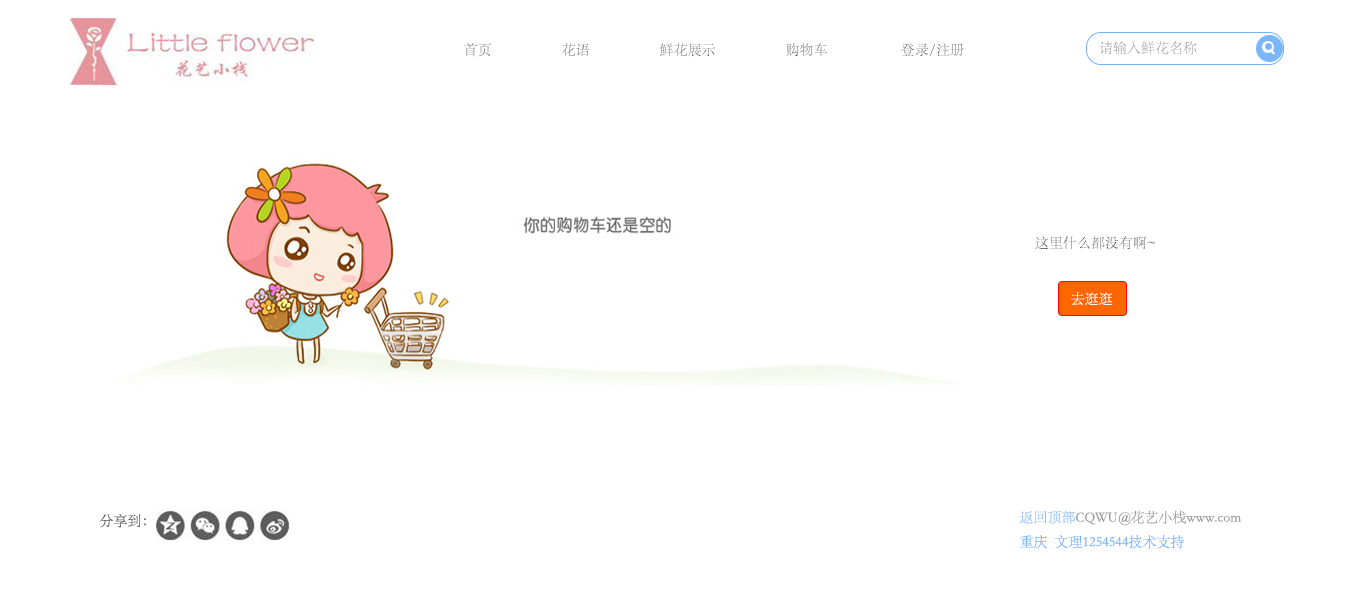
<style>
.page{position:relative;width:1366px;height:610px;background:#ffffff}
.page>*{position:absolute;margin:0}
.t1{font:14px "STSong";color:#7d7a7a}
.t2{font:14px "STSong";color:#3e3c3c}
.t3{font:14px "STSong";color:#2a2a2a}
.t4{font:14px "STSong";color:#fdfbfa}
.t5{font:14px "STSong";color:#72b3fb}
.t6{font:14px "STSong";color:#8fc1fa}
.t7{font:14px "STSong";color:#9b9a9a}
.t8{font:14px "STSong";color:#505050}
</style>
<div class="page">
<p class="t1" style="left:1099px;top:41px;width:98px;height:14px">请输入鲜花名称</p>
<p class="t2" style="left:464px;top:43px;width:500px;height:14px">首页                    花语                    鲜花展示                    购物车                     登录/注册</p>
<p class="t3" style="left:1035px;top:236px;width:120px;height:14px">这里什么都没有啊~</p>
<p class="t4" style="left:1071px;top:292px;width:42px;height:14px">去逛逛</p>
<p class="t5" style="left:1019px;top:510px;width:222px;height:39px"><span class="t6">返回顶部</span><span class="t7">CQWU@花艺小栈www.com<br></span>重庆  文理1254544技术支持</p>
<p class="t8" style="left:99px;top:514px;width:47px;height:14px">分享到：</p>
</div>
